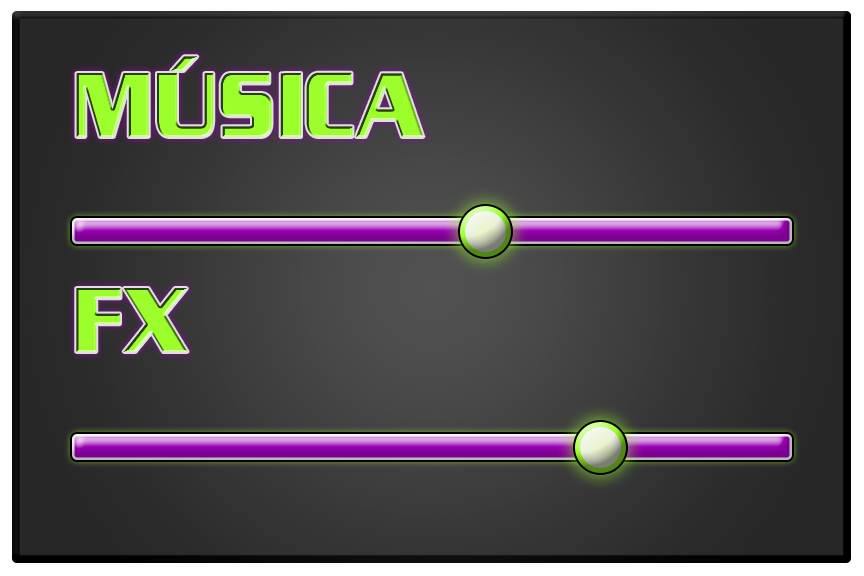
<style>
.page{position:relative;width:864px;height:576px}
.page>*{position:absolute;margin:0}
.t1{font:91.4px "EnterSansmanBold";letter-spacing:0.01em;color:#9cff2b;scale:0.9 1}
</style>
<div class="page">
<p class="t1" style="left:76px;top:56px;width:348px;height:81px">MÚSICA</p>
<p class="t1" style="left:76px;top:288px;width:112px;height:64px">FX</p>
</div>
